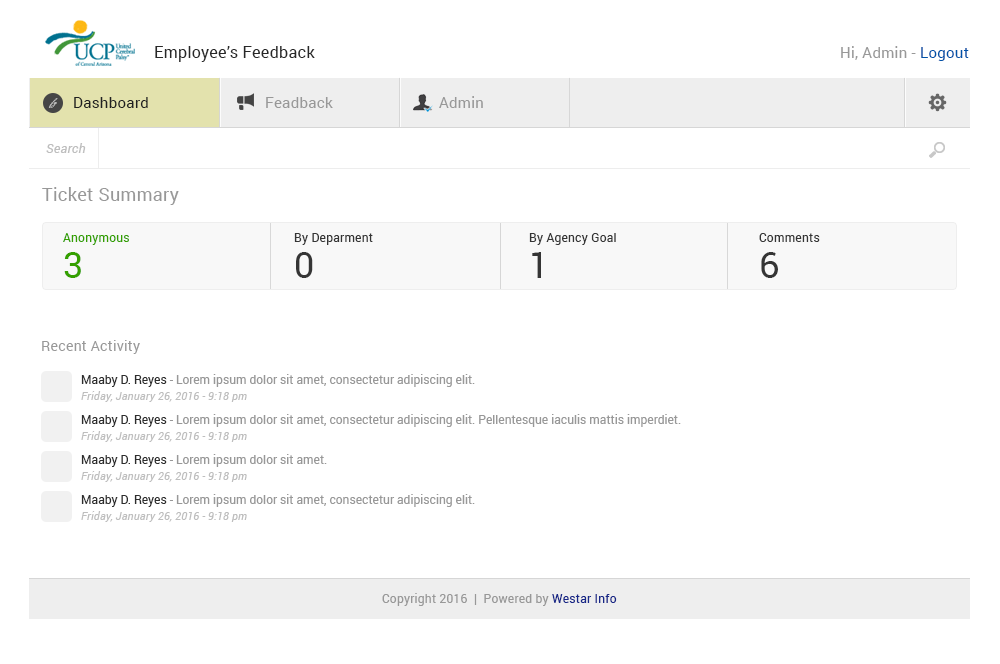
<style>
.page{position:relative;width:1000px;height:664px;background:#ffffff}
.page>*{position:absolute;margin:0}
.t1{font:16px "Roboto-Regular";letter-spacing:0.02em;color:#282828}
.t2{font:15px "Roboto-Regular";letter-spacing:0.02em;color:#989898}
.t3{font:15px "Roboto-Regular";letter-spacing:0.02em;color:#0053a8}
.t4{font:10px "BickhamScriptPro-Regular";letter-spacing:0.02em;color:#bababa}
.t5{font:15px "Roboto-Regular";letter-spacing:0.02em;color:#212121}
.t6{font:13px "Roboto-Italic";letter-spacing:0.02em;color:#bebebe}
.t7{font:18px "Roboto-Regular";letter-spacing:0.02em;color:#989898}
.t8{font:12px "Roboto-Regular";letter-spacing:0.02em;color:#35a000}
.t9{font:12px "Roboto-Regular";letter-spacing:0.02em;color:#353535}
.t10{font:35.8px "Roboto-Regular";letter-spacing:0.02em;color:#35a000}
.t11{font:35.8px "Roboto-Regular";letter-spacing:0.02em;color:#353535}
.t12{font:14px "Roboto-Regular";letter-spacing:0.02em;color:#989898}
.t13{font:12px "Roboto-Regular";color:#989898}
.t14{font:12px "Roboto-Regular";color:#2d2d2d}
.t15{font:11px "Roboto-Italic";letter-spacing:0.02em;color:#bebebe}
.t16{font:12px "Roboto-Regular";letter-spacing:0.02em;color:#989898}
.t17{font:12px "Roboto-Regular";letter-spacing:0.02em;color:#172788}
</style>
<div class="page">
<p class="t1" style="left:155px;top:46px;width:160px;height:16px">Employee’s Feedback</p>
<p class="t2" style="left:841px;top:46px;width:128px;height:15px">Hi, Admin - <span class="t3">Logout</span></p>
<p class="t4" style="left:48px;top:98px;width:10px;height:10px">fg</p>
<p class="t5" style="left:74px;top:97px;width:74px;height:11px">Dashboard</p>
<p class="t2" style="left:266px;top:97px;width:67px;height:11px">Feadback</p>
<p class="t2" style="left:439px;top:96px;width:44px;height:12px">Admin</p>
<p class="t6" style="left:46px;top:143px;width:40px;height:10px">Search</p>
<p class="t7" style="left:42px;top:187px;width:137px;height:18px">Ticket Summary</p>
<p class="t8" style="left:63px;top:233px;width:66px;height:12px">Anonymous</p>
<p class="t9" style="left:294px;top:233px;width:79px;height:12px">By Deparment</p>
<p class="t9" style="left:529px;top:233px;width:87px;height:12px">By Agency Goal</p>
<p class="t9" style="left:759px;top:233px;width:61px;height:9px">Comments</p>
<p class="t10" style="left:64px;top:252px;width:17px;height:26px">3</p>
<p class="t11" style="left:296px;top:252px;width:17px;height:26px">0</p>
<p class="t11" style="left:532px;top:252px;width:9px;height:26px">1</p>
<p class="t11" style="left:761px;top:252px;width:17px;height:26px">6</p>
<p class="t12" style="left:42px;top:340px;width:98px;height:14px">Recent Activity</p>
<p class="t13" style="left:81px;top:374px;width:394px;height:13px"><span class="t14">Maaby D. Reyes</span> - Lorem ipsum dolor sit amet, consectetur adipiscing elit.</p>
<p class="t15" style="left:81px;top:391px;width:166px;height:11px">Friday, January 26, 2016 - 9:18 pm</p>
<p class="t13" style="left:81px;top:414px;width:600px;height:13px"><span class="t14">Maaby D. Reyes</span> - Lorem ipsum dolor sit amet, consectetur adipiscing elit. Pellentesque iaculis mattis imperdiet.</p>
<p class="t15" style="left:81px;top:431px;width:166px;height:11px">Friday, January 26, 2016 - 9:18 pm</p>
<p class="t13" style="left:81px;top:454px;width:246px;height:13px"><span class="t14">Maaby D. Reyes</span> - Lorem ipsum dolor sit amet.</p>
<p class="t15" style="left:81px;top:471px;width:166px;height:11px">Friday, January 26, 2016 - 9:18 pm</p>
<p class="t13" style="left:81px;top:494px;width:394px;height:13px"><span class="t14">Maaby D. Reyes</span> - Lorem ipsum dolor sit amet, consectetur adipiscing elit.</p>
<p class="t15" style="left:81px;top:511px;width:166px;height:11px">Friday, January 26, 2016 - 9:18 pm</p>
<p class="t16" style="left:382px;top:593px;width:235px;height:13px">Copyright 2016  |  Powered by <span class="t17">Westar Info</span></p>
</div>
